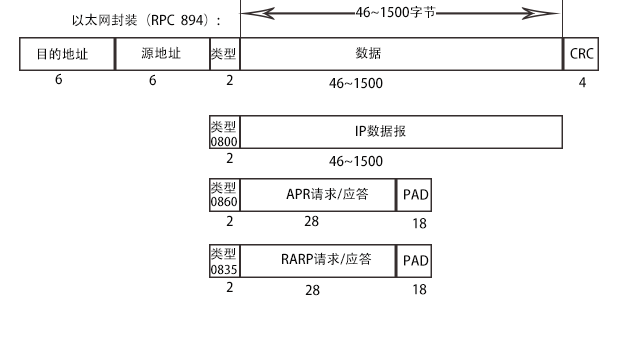
<style>
.page{position:relative;width:636px;height:349px;background:#ffffff}
.page>*{position:absolute;margin:0}
.t1{font:13.3px "AdobeHeitiStd-Regular";color:#0a0909}
.t2{font:12px "AdobeHeitiStd-Regular";color:#0a0909}
</style>
<div class="page">
<p class="t1" style="left:355px;top:5px;width:81px;height:13px">46~1500字节</p>
<p class="t1" style="left:72px;top:13px;width:148px;height:14px">以太网封装（RPC  894）:</p>
<p class="t1" style="left:37px;top:47px;width:51px;height:13px">目的地址</p>
<p class="t1" style="left:141px;top:46px;width:40px;height:13px">源地址</p>
<p class="t1" style="left:211px;top:47px;width:25px;height:13px">类型</p>
<p class="t1" style="left:355px;top:47px;width:26px;height:12px">数据</p>
<p class="t1" style="left:570px;top:48px;width:24px;height:11px">CRC</p>
<p class="t1" style="left:55px;top:73px;width:7px;height:12px">6</p>
<p class="t1" style="left:149px;top:74px;width:7px;height:12px">6</p>
<p class="t1" style="left:226px;top:74px;width:7px;height:11px">2</p>
<p class="t1" style="left:329px;top:77px;width:54px;height:12px">46~1500</p>
<p class="t1" style="left:579px;top:77px;width:7px;height:11px">4</p>
<p class="t1" style="left:211px;top:120px;width:25px;height:13px">类型</p>
<p class="t1" style="left:356px;top:125px;width:50px;height:12px">IP数据报</p>
<p class="t2" style="left:211px;top:136px;width:26px;height:11px">0800</p>
<p class="t1" style="left:226px;top:152px;width:7px;height:11px">2</p>
<p class="t1" style="left:329px;top:155px;width:54px;height:12px">46~1500</p>
<p class="t1" style="left:211px;top:181px;width:25px;height:13px">类型</p>
<p class="t2" style="left:211px;top:196px;width:26px;height:11px">0860</p>
<p class="t1" style="left:286px;top:187px;width:83px;height:13px">APR请求/应答</p>
<p class="t1" style="left:404px;top:189px;width:25px;height:11px">PAD</p>
<p class="t1" style="left:226px;top:215px;width:7px;height:11px">2</p>
<p class="t1" style="left:304px;top:215px;width:15px;height:12px">28</p>
<p class="t1" style="left:413px;top:218px;width:14px;height:11px">18</p>
<p class="t1" style="left:211px;top:247px;width:25px;height:13px">类型</p>
<p class="t1" style="left:282px;top:252px;width:90px;height:13px">RARP请求/应答</p>
<p class="t1" style="left:404px;top:255px;width:25px;height:11px">PAD</p>
<p class="t2" style="left:211px;top:264px;width:26px;height:11px">0835</p>
<p class="t1" style="left:226px;top:281px;width:7px;height:11px">2</p>
<p class="t1" style="left:305px;top:284px;width:15px;height:12px">28</p>
<p class="t1" style="left:413px;top:284px;width:14px;height:11px">18</p>
</div>
